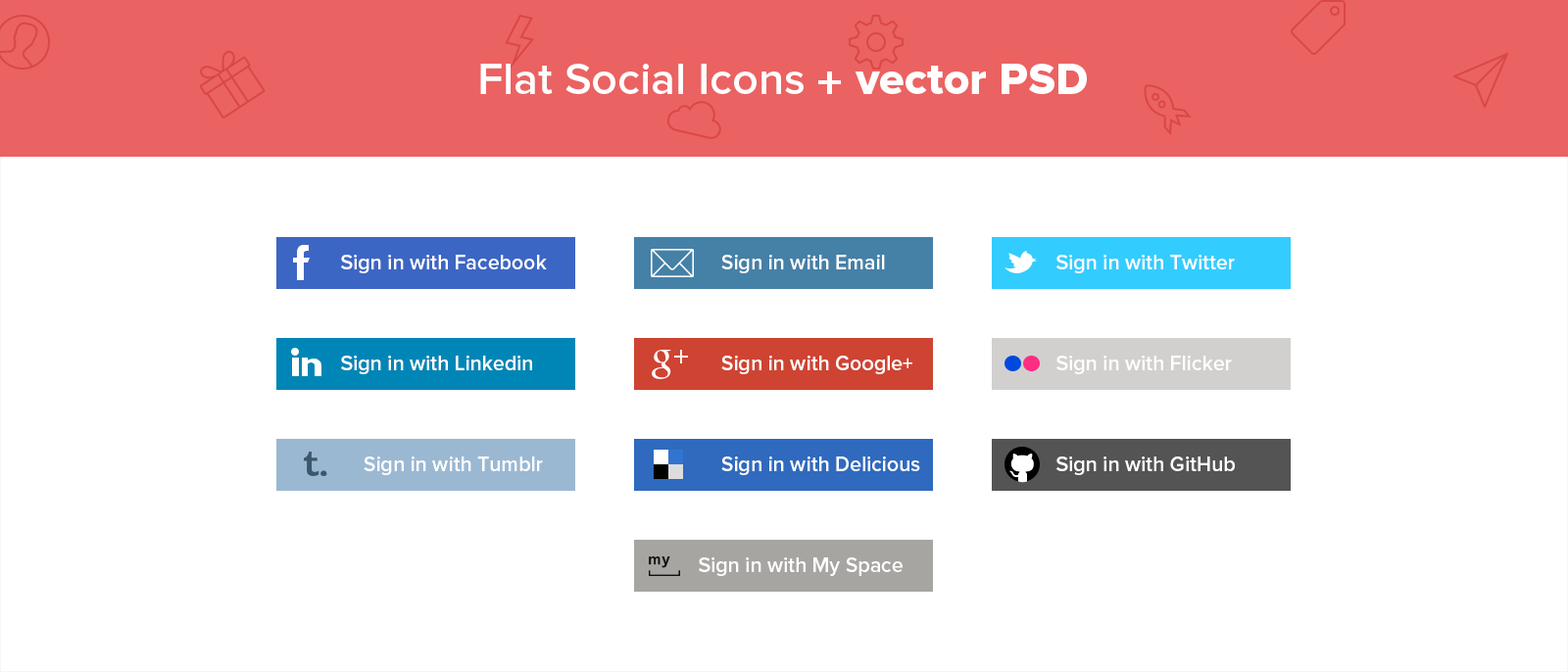
<style>
.page{position:relative;width:1568px;height:672px;background:#ffffff}
.page>*{position:absolute;margin:0}
.t1{font:20.8px "ProximaNova-Semibold";color:#ffffff}
</style>
<div class="page">
<p class="t1" style="left:341px;top:255px;width:206px;height:18px">Sign in with Facebook</p>
<p class="t1" style="left:721px;top:255px;width:164px;height:18px">Sign in with Email</p>
<p class="t1" style="left:1056px;top:255px;width:179px;height:18px">Sign in with Twitter</p>
<p class="t1" style="left:341px;top:356px;width:191px;height:18px">Sign in with Linkedin</p>
<p class="t1" style="left:721px;top:356px;width:191px;height:18px">Sign in with Google+</p>
<p class="t1" style="left:1056px;top:356px;width:176px;height:18px">Sign in with Flicker</p>
<p class="t1" style="left:364px;top:457px;width:179px;height:18px">Sign in with Tumblr</p>
<p class="t1" style="left:721px;top:457px;width:199px;height:18px">Sign in with Delicious</p>
<p class="t1" style="left:1056px;top:457px;width:179px;height:18px">Sign in with GitHub</p>
<p class="t1" style="left:699px;top:558px;width:204px;height:18px">Sign in with My Space</p>
</div>
